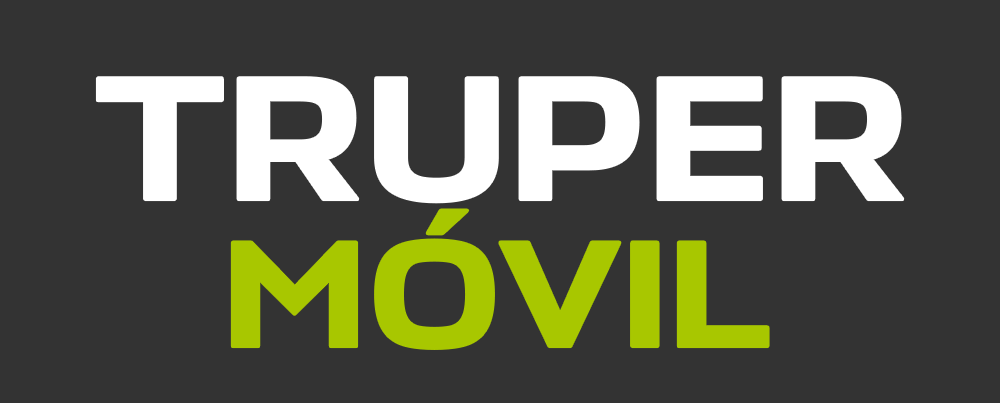
<style>
.page{position:relative;width:1000px;height:403px;background:#333333}
.page>*{position:absolute;margin:0}
.t1{font:175px "StapelText-Medium";color:#ffffff;text-transform:uppercase;scale:1.2 1}
.t2{font:150px "StapelText-Medium";color:#a8c700;text-transform:uppercase;scale:1.2 1}
</style>
<div class="page">
<p class="t1" style="left:97px;top:78px;width:806px;height:124px">TRUPER</p>
<p class="t2" style="left:232px;top:210px;width:536px;height:138px">MÓVIL</p>
</div>
